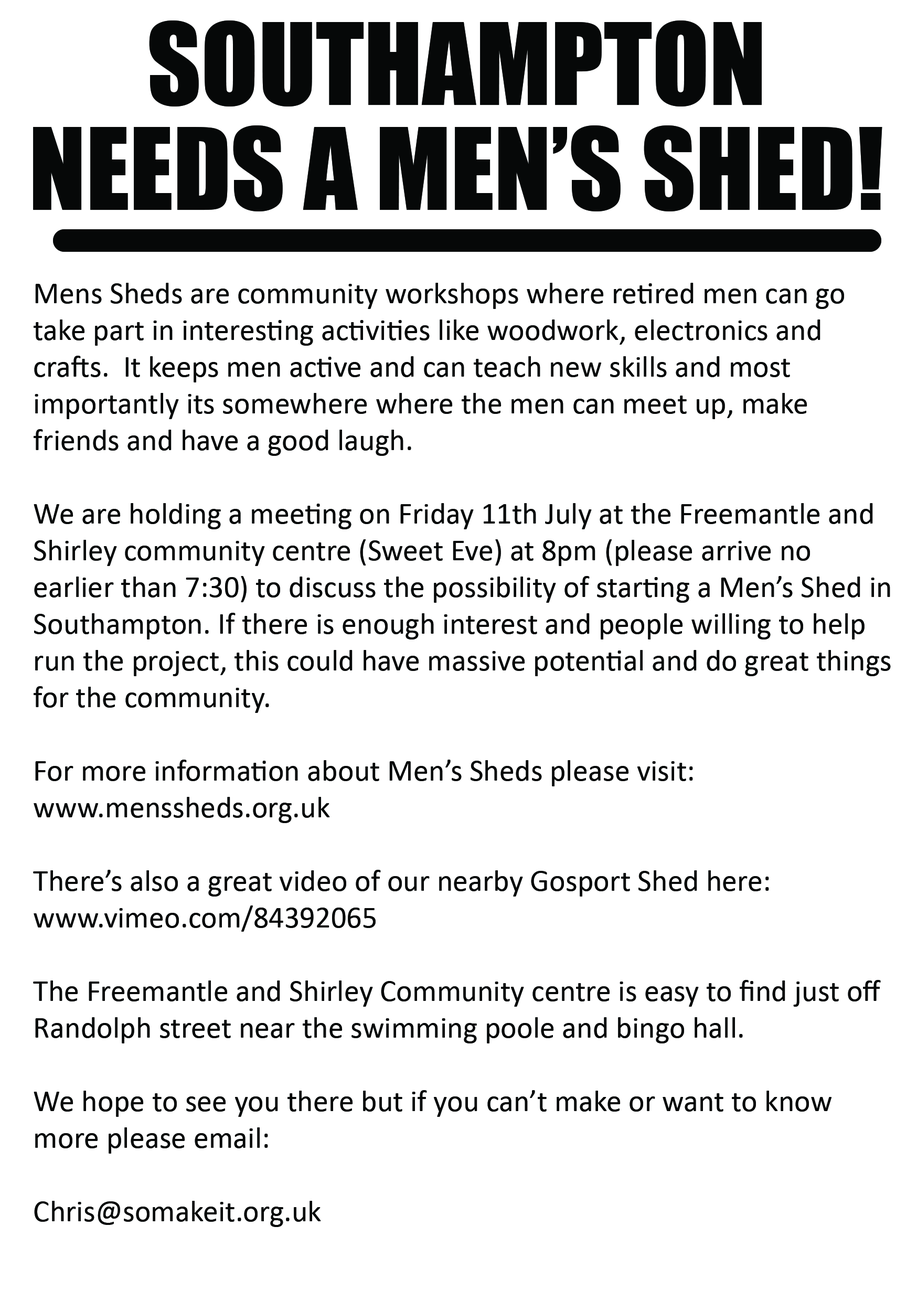
<style>
.page{position:relative;width:917px;height:1301px;background:#ffffff}
.page>*{position:absolute;margin:0}
.t1{font:104.9px/104.9px "Impact";color:#060808}
.t2{font:30.6px "Calibri";color:#060808}
</style>
<div class="page">
<p class="t1" style="left:33px;top:20px;width:849px;height:191px;text-align:center">SOUTHAMPTON  NEEDS A MEN’S SHED!</p>
<p class="t2" style="left:33px;top:283px;width:858px;height:944px">Mens Sheds are community workshops where retired men can go take part in interesting activities like woodwork, electronics and crafts.  It keeps men active and can teach new skills and most <br>importantly its somewhere where the men can meet up, make friends and have a good laugh.<br><br>We are holding a meeting on Friday 11th July at the Freemantle and Shirley community centre (Sweet Eve) at 8pm (please arrive no <br>earlier than 7:30) to discuss the possibility of starting a Men’s Shed in Southampton. If there is enough interest and people willing to help run the project, this could have massive potential and do great things for the community.<br><br>For more information about Men’s Sheds please visit:<br>www.menssheds.org.uk<br><br>There’s also a great video of our nearby Gosport Shed here:<br>www.vimeo.com/84392065<br><br>The Freemantle and Shirley Community centre is easy to find just off Randolph street near the swimming poole and bingo hall.<br><br>We hope to see you there but if you can’t make or want to know more please email:<br><br>Chris@somakeit.org.uk</p>
</div>
